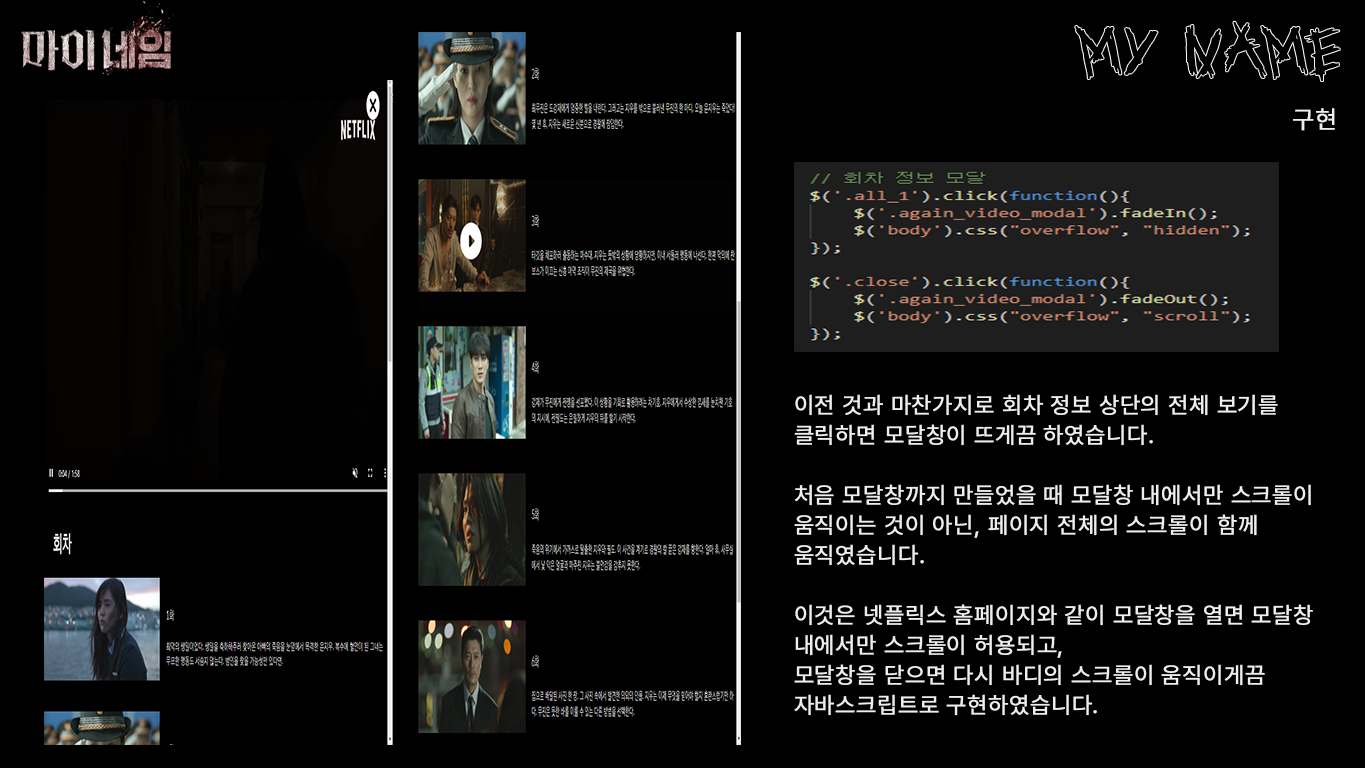
<style>
.page{position:relative;width:1365px;height:768px;background:#000000}
.page>*{position:absolute;margin:0}
.t1{font:25px "Pretendard-Regular";letter-spacing:0.03em;color:#eeeeee;font-weight:bold}
.t2{font:23px/30px "Pretendard-Regular";letter-spacing:0.03em;color:#eeeeee;font-weight:bold}
</style>
<div class="page">
<p class="t1" style="left:1293px;top:108px;width:42px;height:23px">구현</p>
<p class="t2" style="left:794px;top:394px;width:519px;height:322px">이전 것과 마찬가지로 회차 정보 상단의 전체 보기를<br>클릭하면 모달창이 뜨게끔 하였습니다.<br><br>처음 모달창까지 만들었을 때 모달창 내에서만 스크롤이 <br>움직이는 것이 아닌, 페이지 전체의 스크롤이 함께 <br>움직였습니다.<br><br>이것은 넷플릭스 홈페이지와 같이 모달창을 열면 모달창<br>내에서만 스크롤이 허용되고, <br>모달창을 닫으면 다시 바디의 스크롤이 움직이게끔 <br>자바스크립트로 구현하였습니다.</p>
</div>
